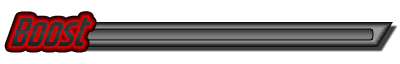
<style>
.page{position:relative;width:400px;height:64px;background:#ffffff}
.page>*{position:absolute;margin:0}
.t1{font:41.8px "GROTESKIA-OBLIQUE";letter-spacing:-0.06em;color:#3d3d3d;font-weight:bold;font-style:italic}
</style>
<div class="page">
<p class="t1" style="left:10px;top:17px;width:81px;height:30px">Boost</p>
</div>
